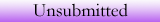
<style>
.page{position:relative;width:160px;height:22px}
.page>*{position:absolute;margin:0}
.t1{font:18.7px "Garamond";color:#000000}
</style>
<div class="page">
<p class="t1" style="left:33px;top:3px;width:95px;height:14px">Unsubmitted</p>
</div>
